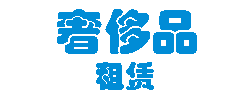
<style>
.page{position:relative;width:235px;height:97px;background:#ffffff}
.page>*{position:absolute;margin:0}
.t1{font:48px "STHupo";color:#008cd6}
.t2{font:30px "STHupo";color:#008cd6}
</style>
<div class="page">
<p class="t1" style="left:57px;top:9px;width:140px;height:45px">奢侈品</p>
<p class="t2" style="left:96px;top:62px;width:58px;height:28px">租赁</p>
</div>
